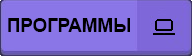
<style>
.page{position:relative;width:192px;height:56px;background:#8a76e7}
.page>*{position:absolute;margin:0}
.t1{font:18.7px "Arial-BoldMT";color:#000000}
</style>
<div class="page">
<p class="t1" style="left:8px;top:18px;width:122px;height:14px">ПРОГРАММЫ</p>
</div>
